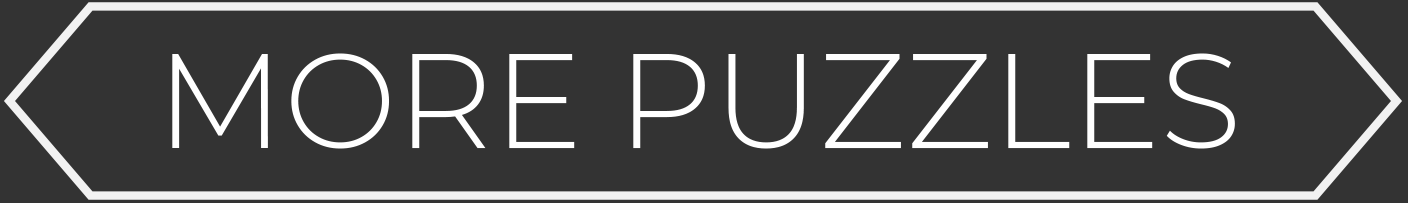
<style>
.page{position:relative;width:1408px;height:203px;background:#333333}
.page>*{position:absolute;margin:0}
.t1{font:134.1px "Montserrat-Light";color:#ffffff}
</style>
<div class="page">
<p class="t1" style="left:172px;top:53px;width:1063px;height:96px">MORE PUZZLES</p>
</div>
